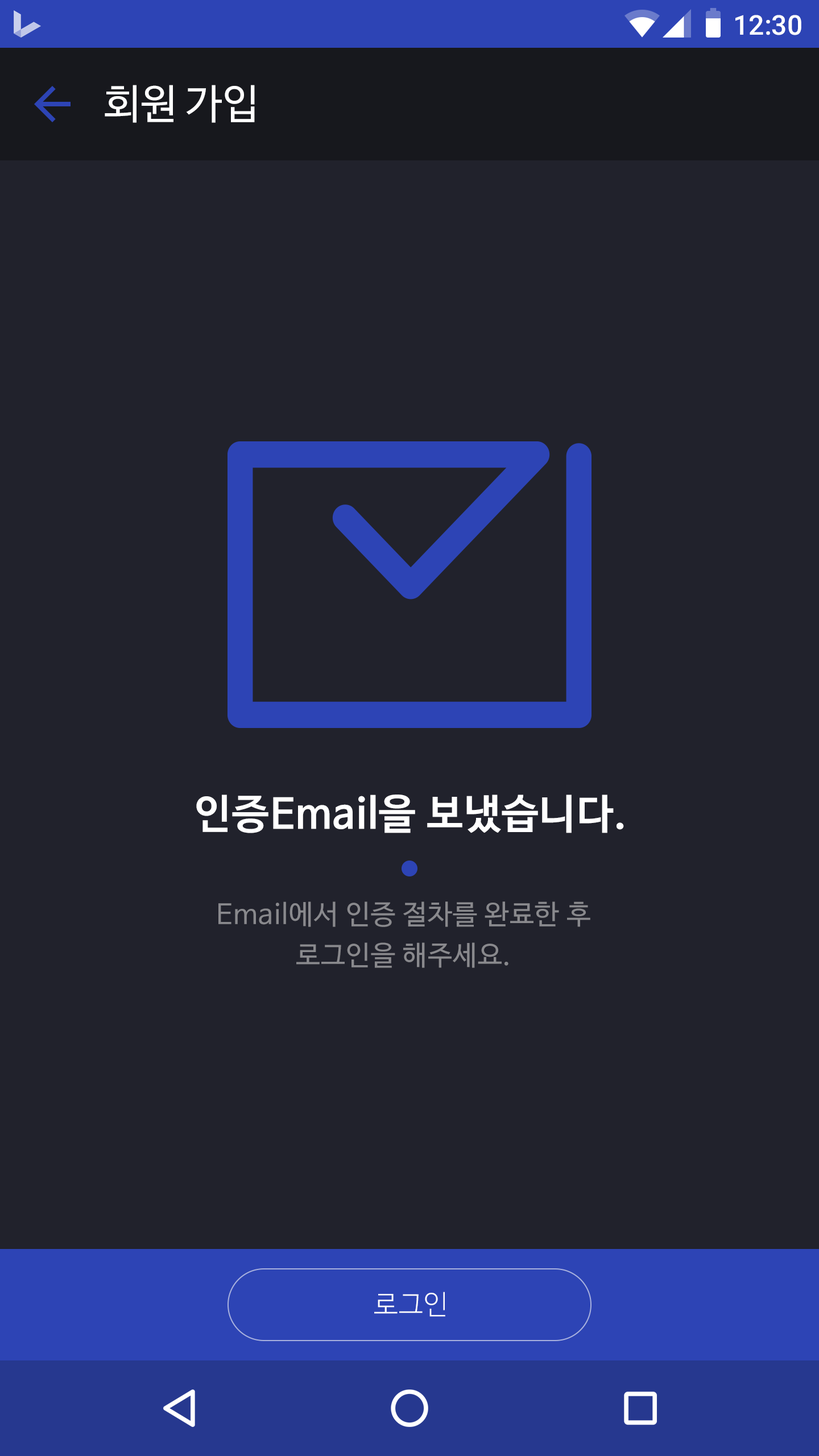
<style>
.page{position:relative;width:819px;height:1456px;background:#21222c}
.page>*{position:absolute;margin:0}
.t1{font:27.3px "Roboto-Medium";color:#ffffff}
.t2{font:40.9px "NanumBarunGothic";color:#ffffff}
.t3{font:40.9px "NanumBarunGothicBold";letter-spacing:0.025em;color:#ffffff}
.t4{font:27.3px/40.9px "NanumBarunGothic";letter-spacing:0.025em;color:#89898d}
.t5{font:27.3px "NanumBarunGothicLight";letter-spacing:0.025em;color:#ffffff}
</style>
<div class="page">
<p class="t1" style="left:735px;top:15px;width:66px;height:20px">12:30</p>
<p class="t2" style="left:105px;top:85px;width:150px;height:38px">회원 가입</p>
<p class="t3" style="left:196px;top:795px;width:428px;height:38px">인증Email을 보냈습니다.</p>
<p class="t4" style="left:218px;top:901px;width:372px;height:67px;text-align:center">Email에서 인증 절차를 완료한 후<br>로그인을 해주세요.</p>
<p class="t5" style="left:374px;top:1292px;width:71px;height:25px">로그인</p>
</div>
